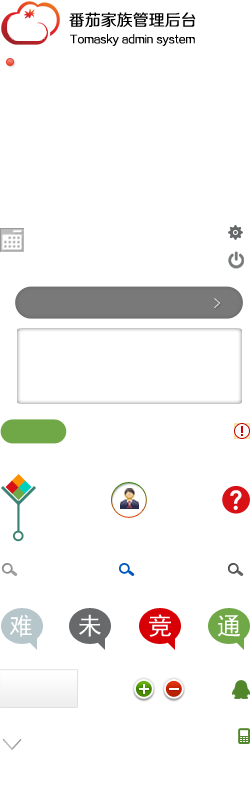
<style>
.page{position:relative;width:250px;height:800px;background:#ffffff}
.page>*{position:absolute;margin:0}
.t1{font:16px "FZZHJW--GB1-0";color:#000000}
.t2{font:10px "FZZHJW--GB1-0";color:#000000}
.t3{font:14px "SimHei"}
.t4{font:26.7px "¹ã½Ý¾ÓÃÔÄã×Ö¿â";color:#ffffff}
.t5{font:24px "SimHei";color:#ffffff}
.t6{font:26.6px "SimHei"}
</style>
<div class="page">
<p class="t1" style="left:69px;top:12px;width:127px;height:16px">番茄家族管理后台</p>
<p class="t2" style="left:70px;top:34px;width:125px;height:12px">Tomasky admin system</p>
<p class="t3" style="left:214px;top:298px;width:7px;height:10px">&gt;</p>
<p class="t4" style="left:230px;top:490px;width:12px;height:20px">？</p>
<p class="t5" style="left:10px;top:614px;width:22px;height:23px">难</p>
<p class="t5" style="left:78px;top:614px;width:23px;height:23px">未</p>
<p class="t5" style="left:149px;top:614px;width:22px;height:23px">竞</p>
<p class="t5" style="left:217px;top:615px;width:23px;height:22px">通</p>
<p class="t6" style="left:2px;top:739px;width:20px;height:12px;rotate:90deg">&gt;</p>
</div>
